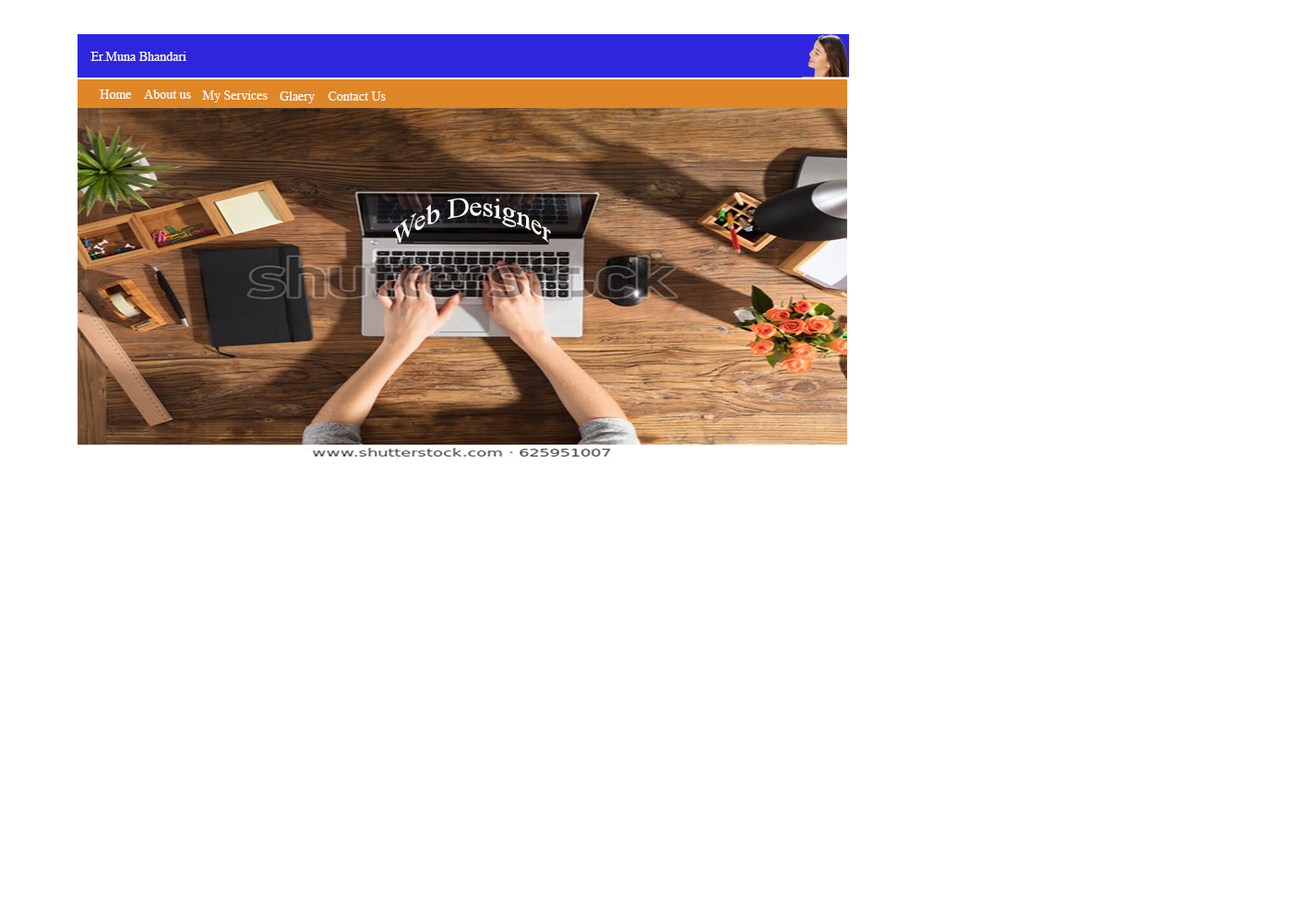
<style>
.page{position:relative;width:1292px;height:923px;background:#ffffff}
.page>*{position:absolute;margin:0}
.t1{font:12.9px "TimesNewRomanPSMT";color:#f8f8fb}
.t2{font:12.9px "TimesNewRomanPSMT";color:#fbf8f4}
.t3{font:27.7px "TimesNewRomanPSMT";color:#fbf8f4}
</style>
<div class="page">
<p class="t1" style="left:90px;top:52px;width:96px;height:9px">Er.Muna Bhandari</p>
<p class="t2" style="left:100px;top:90px;width:32px;height:9px">Home</p>
<p class="t2" style="left:144px;top:90px;width:47px;height:9px">About us</p>
<p class="t2" style="left:202px;top:90px;width:66px;height:12px">My Services</p>
<p class="t2" style="left:280px;top:91px;width:35px;height:12px">Glaery</p>
<p class="t2" style="left:328px;top:91px;width:58px;height:10px">Contact Us</p>
<p class="t3" style="left:393px;top:197px;width:158px;height:47px">Web Designer</p>
</div>
